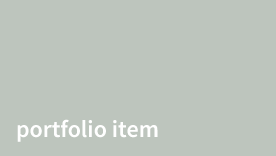
<style>
.page{position:relative;width:276px;height:156px;background:#bdc5bd}
.page>*{position:absolute;margin:0}
.t1{font:24px "SourceSansPro-Semibold";color:#ffffff}
</style>
<div class="page">
<p class="t1" style="left:17px;top:119px;width:141px;height:23px">portfolio item</p>
</div>
